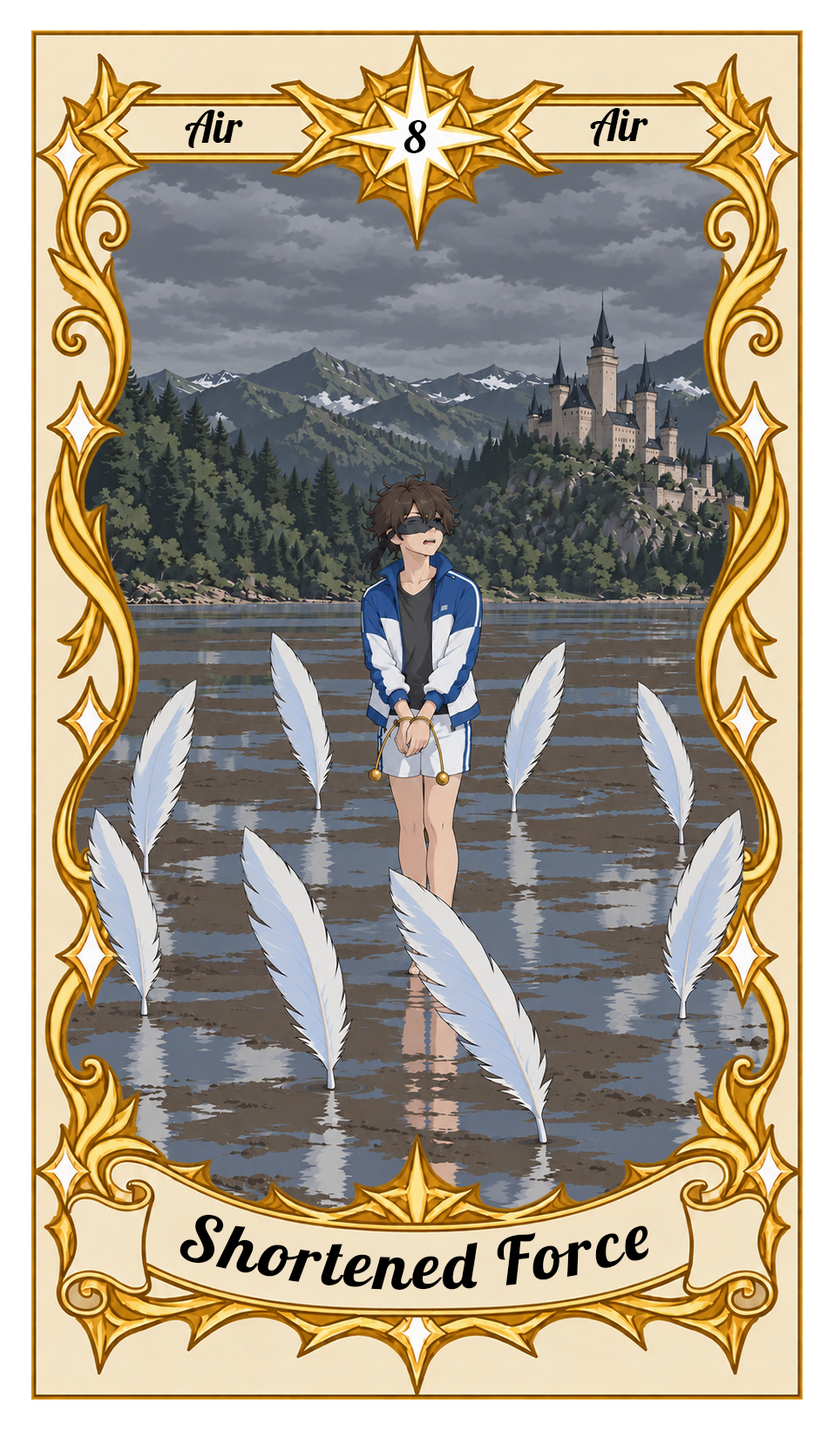
<style>
.page{position:relative;width:834px;height:1430px}
.page>*{position:absolute;margin:0}
.t1{font:43.6px "Lobster-Regular";color:#000000}
.t2{font:65.3px "Lobster-Regular";letter-spacing:0.05em;color:#000000}
</style>
<div class="page">
<p class="t1" style="left:185px;top:110px;width:58px;height:38px">Air</p>
<p class="t1" style="left:590px;top:108px;width:58px;height:38px">Air</p>
<p class="t1" style="left:403px;top:120px;width:24px;height:33px">8</p>
<p class="t2" style="left:179px;top:1214px;width:470px;height:76px">Shortened Force</p>
</div>
